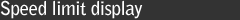
<style>
.page{position:relative;width:240px;height:20px;background:#333333}
.page>*{position:absolute;margin:0}
.t1{font:19px "BellGothicStd-Bold";letter-spacing:-0.025em;color:#ffffff}
</style>
<div class="page">
<p class="t1" style="left:0px;top:0px;width:143px;height:19px">Speed limit display</p>
</div>
